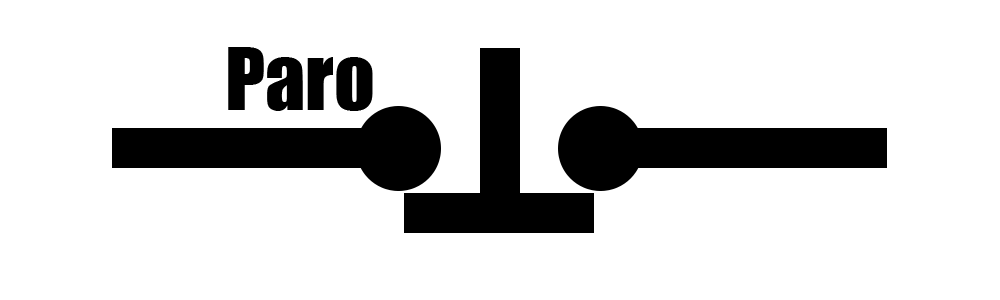
<style>
.page{position:relative;width:1000px;height:300px;background:#ffffff}
.page>*{position:absolute;margin:0}
.t1{font:80px "Impact";color:#000000}
</style>
<div class="page">
<p class="t1" style="left:228px;top:47px;width:145px;height:64px">Paro</p>
</div>
